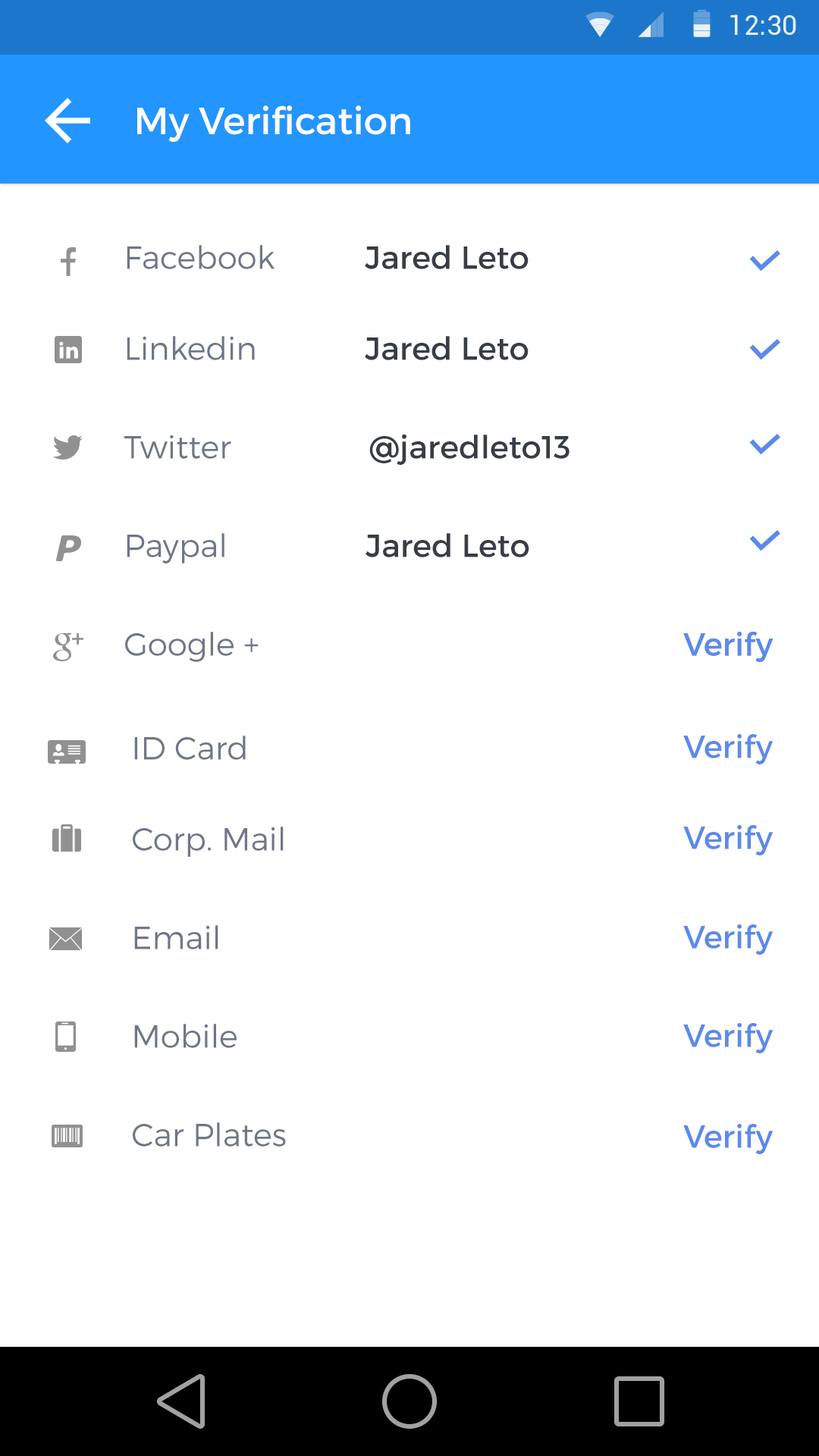
<style>
.page{position:relative;width:819px;height:1456px;background:#ffffff}
.page>*{position:absolute;margin:0}
.t1{font:37.9px "Montserrat-Regular";color:#ffffff}
.t2{font:31.8px "Montserrat-Light";color:#6f7688}
.t3{font:31.8px "Montserrat-Regular";color:#383c46}
.t4{font:31.8px "Montserrat-Regular";color:#5c8aea}
</style>
<div class="page">
<p class="t1" style="left:137px;top:105px;width:273px;height:37px">My Verification</p>
<p class="t2" style="left:127px;top:245px;width:148px;height:24px">Facebook</p>
<p class="t3" style="left:365px;top:245px;width:164px;height:24px">Jared Leto</p>
<p class="t2" style="left:127px;top:336px;width:128px;height:24px">Linkedin</p>
<p class="t3" style="left:365px;top:336px;width:164px;height:24px">Jared Leto</p>
<p class="t2" style="left:124px;top:435px;width:107px;height:24px">Twitter</p>
<p class="t3" style="left:369px;top:434px;width:201px;height:31px">@jaredleto13</p>
<p class="t2" style="left:127px;top:533px;width:97px;height:30px">Paypal</p>
<p class="t3" style="left:366px;top:533px;width:163px;height:24px">Jared Leto</p>
<p class="t2" style="left:125px;top:632px;width:134px;height:30px">Google +</p>
<p class="t4" style="left:683px;top:632px;width:90px;height:30px">Verify</p>
<p class="t4" style="left:683px;top:632px;width:90px;height:30px">Verify</p>
<p class="t2" style="left:134px;top:736px;width:112px;height:24px">ID Card</p>
<p class="t4" style="left:683px;top:734px;width:90px;height:30px">Verify</p>
<p class="t2" style="left:133px;top:827px;width:151px;height:30px">Corp. Mail</p>
<p class="t4" style="left:683px;top:825px;width:90px;height:30px">Verify</p>
<p class="t2" style="left:134px;top:925px;width:84px;height:24px">Email</p>
<p class="t4" style="left:683px;top:924px;width:90px;height:31px">Verify</p>
<p class="t2" style="left:134px;top:1024px;width:103px;height:24px">Mobile</p>
<p class="t4" style="left:683px;top:1023px;width:90px;height:30px">Verify</p>
<p class="t2" style="left:133px;top:1122px;width:153px;height:25px">Car Plates</p>
<p class="t4" style="left:683px;top:1124px;width:90px;height:30px">Verify</p>
</div>
